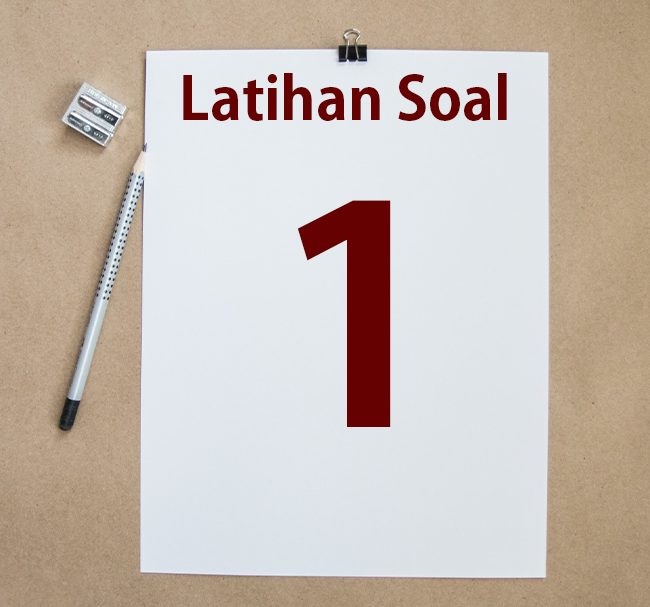
<style>
.page{position:relative;width:650px;height:607px}
.page>*{position:absolute;margin:0}
.t1{font:58.3px "KozGoPr6N-Bold";color:#660101}
.t2{font:300px "KozGoPr6N-Bold";color:#660101}
</style>
<div class="page">
<p class="t1" style="left:183px;top:73px;width:324px;height:48px">Latihan Soal</p>
<p class="t2" style="left:297px;top:200px;width:94px;height:227px">1</p>
</div>
